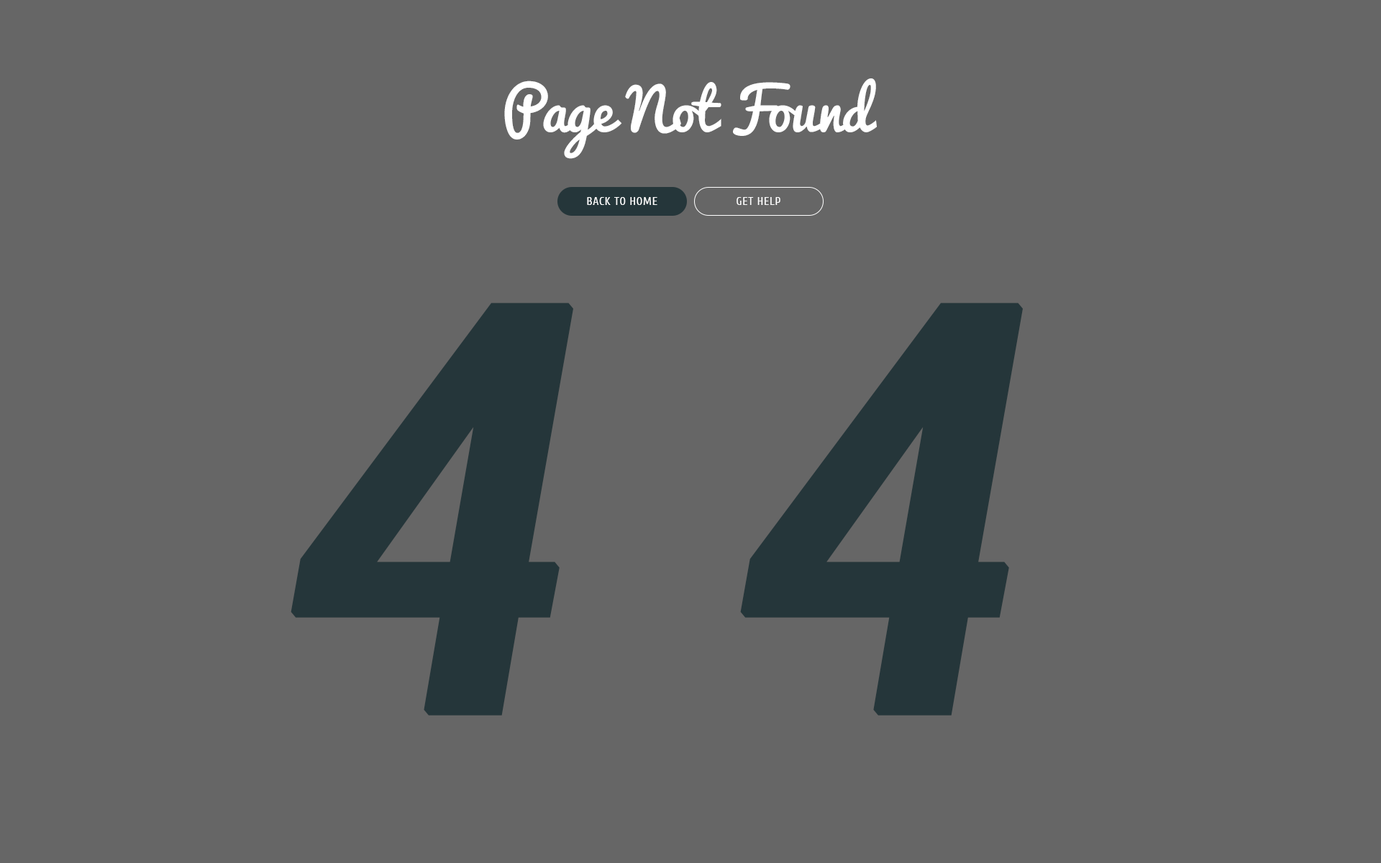
<style>
.page{position:relative;width:1381px;height:863px;background:#666666}
.page>*{position:absolute;margin:0}
.t1{font:57.6px "Pacifico-Regular";letter-spacing:-0.02em;color:#ffffff}
.t2{font:11.5px "Cuprum-Regular";letter-spacing:0.05em;color:#ffffff;text-transform:uppercase}
.t3{font:575.5px "Cuprum-BoldItalic";color:#25363a;font-weight:bold}
</style>
<div class="page">
<p class="t1" style="left:504px;top:78px;width:373px;height:81px">Page Not Found</p>
<p class="t2" style="left:587px;top:197px;width:71px;height:8px">Back to home</p>
<p class="t2" style="left:737px;top:197px;width:44px;height:8px">Get Help</p>
<p class="t3" style="left:291px;top:303px;width:282px;height:413px">4</p>
<p class="t3" style="left:740px;top:303px;width:283px;height:413px">4</p>
</div>
